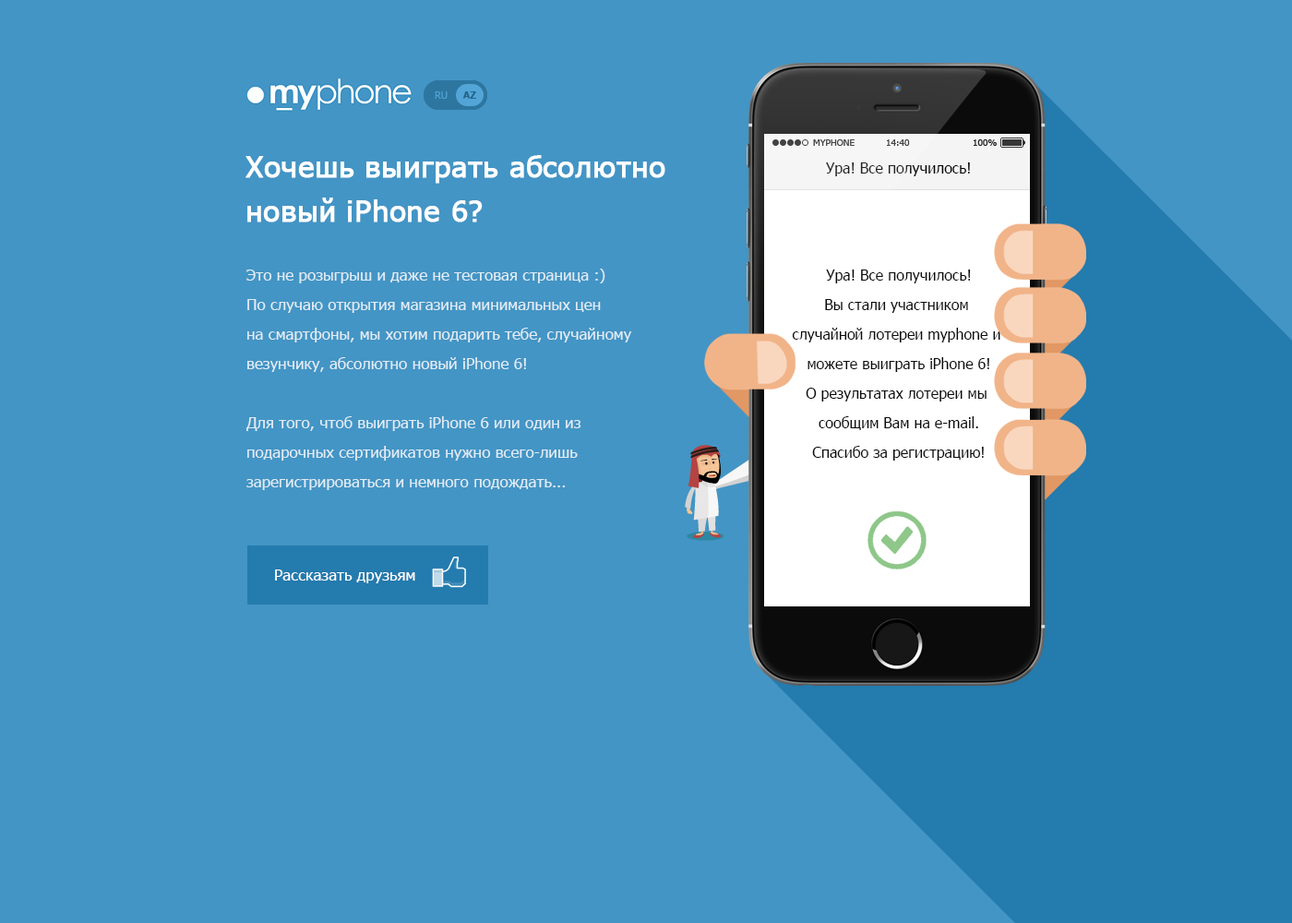
<style>
.page{position:relative;width:1292px;height:923px;background:#4395c5}
.page>*{position:absolute;margin:0}
.t1{font:10.2px "Tahoma-Bold";color:#4593c2}
.t2{font:10.2px "Tahoma";color:#52a5d6}
.t3{font:10.2px "Tahoma-Bold";color:#23658b}
.t4{font:10.2px "Tahoma";color:#23658b}
.t5{font:9.2px "Tahoma";color:#434343}
.t6{font:9.2px "Tahoma";color:#0b0b0b}
.t7{font:29.5px/44.3px "Tahoma";letter-spacing:0.01em;color:#ffffff;font-weight:bold}
.t8{font:14.8px "Tahoma"}
.t9{font:15.7px/29.5px "Tahoma";color:#e2ecf4}
.t10{font:14.8px/29.5px "Tahoma";color:#0b0b0b}
.t11{font:15.7px "Tahoma";color:#ffffff}
</style>
<div class="page">
<p class="t1" style="left:434px;top:91px;width:15px;height:8px">RU</p>
<p class="t2" style="left:435px;top:91px;width:13px;height:8px">RU</p>
<p class="t3" style="left:462px;top:91px;width:14px;height:8px">AZ</p>
<p class="t4" style="left:463px;top:91px;width:13px;height:8px">AZ</p>
<p class="t5" style="left:813px;top:139px;width:42px;height:7px">MYPHONE</p>
<p class="t5" style="left:887px;top:139px;width:23px;height:7px">14:40</p>
<p class="t6" style="left:974px;top:139px;width:23px;height:7px">100%</p>
<p class="t7" style="left:245px;top:155px;width:420px;height:67px">Хочешь выиграть абсолютно <br>новый iPhone 6?</p>
<p class="t8" style="left:826px;top:162px;width:144px;height:14px">Ура! Все получилось!</p>
<p class="t9" style="left:246px;top:269px;width:386px;height:221px">Это не розыгрыш и даже не тестовая страница :)<br>По случаю открытия магазина минимальных цен <br>на смартфоны, мы хотим подарить тебе, случайному <br>везунчику, абсолютно новый iPhone 6!<br><br>Для того, чтоб выиграть iPhone 6 или один из <br>подарочных сертификатов нужно всего-лишь <br>зарегистрироваться и немного подождать...</p>
<p class="t10" style="left:792px;top:269px;width:208px;height:192px;text-align:center">Ура! Все получилось!<br>Вы стали участником <br>случайной лотереи myphone и <br>можете выиграть iPhone 6!<br>О результатах лотереи мы <br>сообщим Вам на e-mail.<br>Спасибо за регистрацию!</p>
<p class="t11" style="left:275px;top:569px;width:140px;height:14px">Рассказать друзьям</p>
</div>
